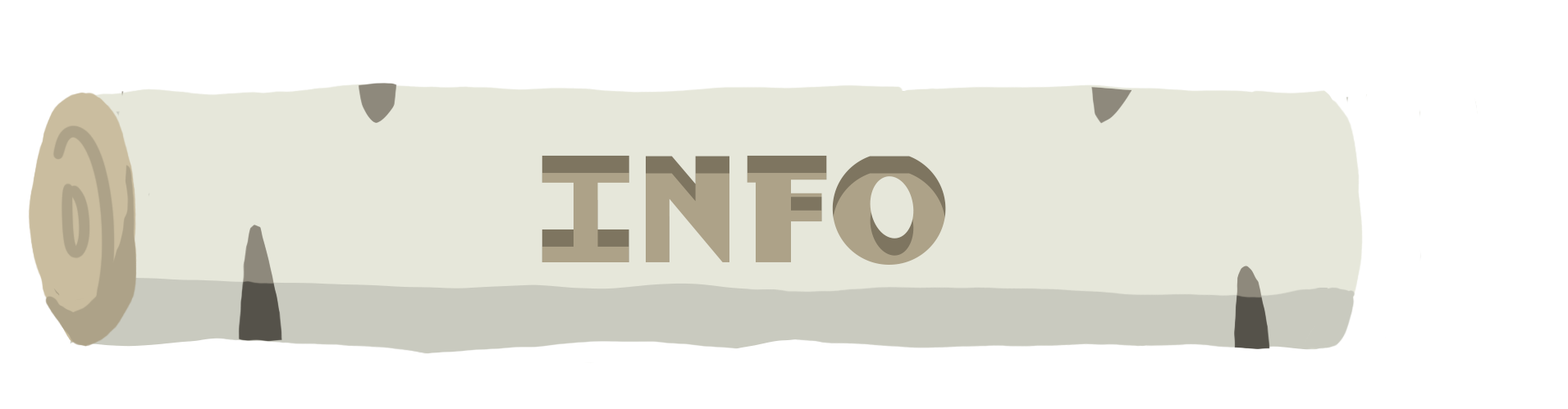
<style>
.page{position:relative;width:1568px;height:409px;background:#ffffff}
.page>*{position:absolute;margin:0}
.t1{font:148px "BadTyp-Regular";color:#ada288}
</style>
<div class="page">
<p class="t1" style="left:542px;top:155px;width:404px;height:110px">Info</p>
</div>
